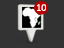
<style>
.page{position:relative;width:64px;height:48px;background:#333333}
.page>*{position:absolute;margin:0}
.t1{font:10px "Calibri";color:#ffffff}
</style>
<div class="page">
<p class="t1" style="left:37px;top:4px;width:9px;height:7px">10</p>
</div>
